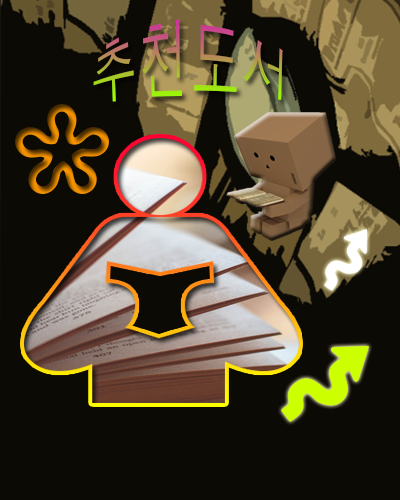
<style>
.page{position:relative;width:400px;height:500px;background:#0c0a05}
.page>*{position:absolute;margin:0}
.t1{font:50.2px "Dotum"}
</style>
<div class="page">
<p class="t1" style="left:93px;top:19px;width:190px;height:83px">추천도서</p>
</div>
